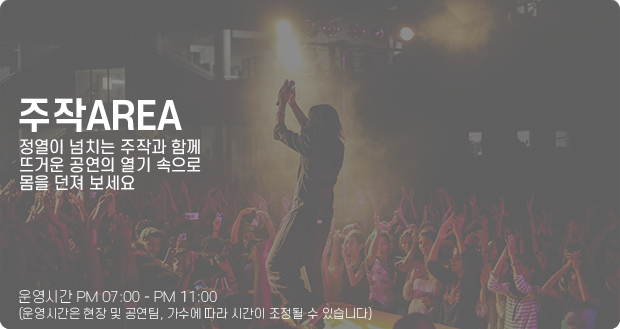
<style>
.page{position:relative;width:620px;height:329px}
.page>*{position:absolute;margin:0}
.t1{font:36px "S-CoreDream-6Bold";color:#ffffff}
.t2{font:16px/18px "S-CoreDream-4Regular";color:#ffffff}
.t3{font:12px/16px "S-CoreDream-1Thin";color:#ffffff}
.t4{font:14px/18px "S-CoreDream-1Thin";color:#ffffff}
</style>
<div class="page">
<p class="t1" style="left:19px;top:98px;width:163px;height:34px">주작AREA</p>
<p class="t2" style="left:20px;top:139px;width:181px;height:52px">정열이 넘치는 주작과 함께<br>뜨거운 공연의 열기 속으로<br>몸을 던져 보세요</p>
<p class="t3" style="left:19px;top:290px;width:353px;height:30px"><span class="t4">운영시간 PM 07:00 - PM 11:00<br></span>(운영시간은 현장 및 공연팀, 가수에 따라 시간이 조정될 수 있습니다)</p>
</div>
